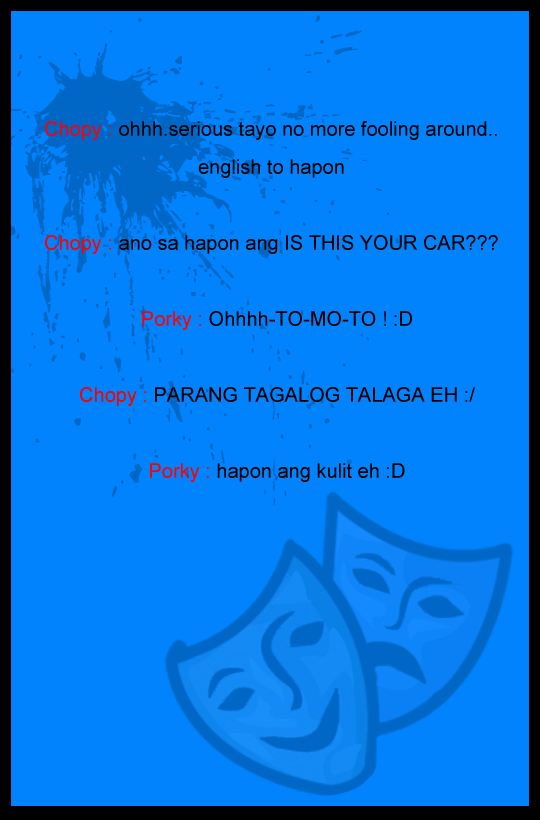
<style>
.page{position:relative;width:540px;height:820px;background:#0083fd}
.page>*{position:absolute;margin:0}
.t1{font:20px/38px "ArialMT";color:#000000}
.t2{font:20px/38px "ArialMT";color:#ff0000}
.t3{font:20px/38px "ArialMT";color:#f80000}
</style>
<div class="page">
<p class="t1" style="left:45px;top:121px;width:453px;height:361px;text-align:center"><span class="t2">Chopy :</span> ohhh.serious tayo no more fooling around..<br>english to hapon<br><br><span class="t2">Chopy :</span> ano sa hapon ang IS THIS YOUR CAR???<br><br>  <span class="t2">Porky :</span> Ohhhh-TO-MO-TO ! :D<br><br> <span class="t3"> Chopy :</span> PARANG TAGALOG TALAGA EH :/<br><br>  <span class="t2">Porky :</span> hapon ang kulit eh :D</p>
</div>
